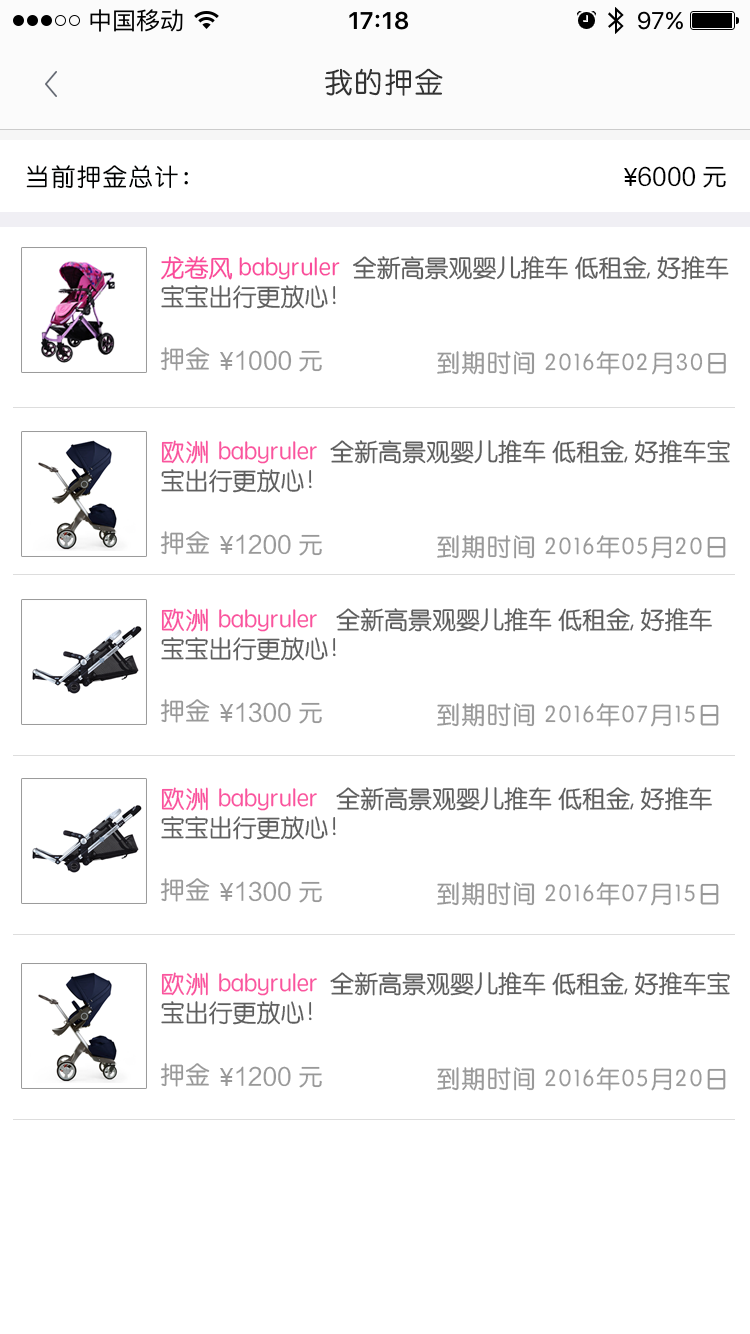
<style>
.page{position:relative;width:750px;height:1334px;background:#ffffff}
.page>*{position:absolute;margin:0}
.t1{font:28px "STYuanti-SC-Regular";letter-spacing:0.075em;color:#333333}
.t2{font:24px "STYuanti-SC-Regular";letter-spacing:0.075em;color:#000101}
.t3{font:24px "MicrosoftYaHei";letter-spacing:0.05em;color:#000000}
.t4{font:24px "FZLTHK_ZJRB--GBK1-0";color:#000000}
.t5{font:24px "STYuanti-SC-Regular";color:#5f5f5f}
.t6{font:24px "STYuanti-SC-Regular";color:#fa4b9b}
.t7{font:24px "STYuanti-SC-Regular";letter-spacing:0.05em;color:#999999}
.t8{font:24px "MicrosoftYaHei";letter-spacing:0.05em;color:#999999}
.t9{font:24px "FZLTHK_ZJRB--GBK1-0";color:#999999}
.t10{font:24px "STYuanti-SC-Regular";letter-spacing:0.05em;color:#fa539f}
.t11{font:24px "STYuanti-SC-Regular";letter-spacing:-0.01em;color:#fa539f}
</style>
<div class="page">
<p class="t1" style="left:325px;top:68px;width:118px;height:28px">我的押金</p>
<p class="t2" style="left:26px;top:165px;width:162px;height:24px">当前押金总计：</p>
<p class="t3" style="left:624px;top:168px;width:13px;height:18px">￥</p>
<p class="t4" style="left:638px;top:166px;width:88px;height:22px">6000 元</p>
<p class="t5" style="left:161px;top:256px;width:568px;height:53px"><span class="t6">龙卷风 babyruler  </span>全新高景观婴儿推车 低租金, 好推车宝宝出行更放心！</p>
<p class="t7" style="left:160px;top:347px;width:50px;height:24px">押金</p>
<p class="t8" style="left:220px;top:352px;width:13px;height:18px">￥</p>
<p class="t9" style="left:236px;top:350px;width:86px;height:22px">1000 元</p>
<p class="t7" style="left:437px;top:351px;width:289px;height:24px">到期时间 2016年02月30日</p>
<p class="t5" style="left:161px;top:440px;width:569px;height:53px"><span class="t10">欧洲 </span><span class="t11">babyruler  </span>全新高景观婴儿推车 低租金, 好推车宝宝出行更放心！</p>
<p class="t7" style="left:160px;top:531px;width:50px;height:24px">押金</p>
<p class="t9" style="left:236px;top:534px;width:86px;height:22px">1200 元</p>
<p class="t8" style="left:220px;top:536px;width:13px;height:18px">￥</p>
<p class="t7" style="left:437px;top:535px;width:289px;height:24px">到期时间 2016年05月20日</p>
<p class="t5" style="left:161px;top:608px;width:551px;height:53px"><span class="t10">欧洲 </span><span class="t11">babyruler   </span>全新高景观婴儿推车 低租金, 好推车宝宝出行更放心！</p>
<p class="t7" style="left:160px;top:699px;width:50px;height:24px">押金</p>
<p class="t9" style="left:236px;top:702px;width:86px;height:22px">1300 元</p>
<p class="t8" style="left:220px;top:704px;width:13px;height:18px">￥</p>
<p class="t7" style="left:437px;top:703px;width:282px;height:24px">到期时间 2016年07月15日</p>
<p class="t5" style="left:161px;top:787px;width:551px;height:53px"><span class="t10">欧洲 </span><span class="t11">babyruler   </span>全新高景观婴儿推车 低租金, 好推车宝宝出行更放心！</p>
<p class="t7" style="left:160px;top:878px;width:50px;height:24px">押金</p>
<p class="t9" style="left:236px;top:881px;width:86px;height:22px">1300 元</p>
<p class="t8" style="left:220px;top:883px;width:13px;height:18px">￥</p>
<p class="t7" style="left:437px;top:882px;width:282px;height:24px">到期时间 2016年07月15日</p>
<p class="t5" style="left:161px;top:972px;width:569px;height:53px"><span class="t10">欧洲 </span><span class="t11">babyruler  </span>全新高景观婴儿推车 低租金, 好推车宝宝出行更放心！</p>
<p class="t7" style="left:160px;top:1063px;width:50px;height:24px">押金</p>
<p class="t8" style="left:220px;top:1068px;width:13px;height:18px">￥</p>
<p class="t9" style="left:236px;top:1066px;width:86px;height:22px">1200 元</p>
<p class="t7" style="left:437px;top:1067px;width:289px;height:24px">到期时间 2016年05月20日</p>
</div>
